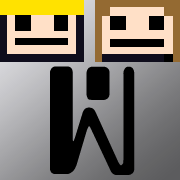
<style>
.page{position:relative;width:180px;height:180px;background:#000000}
.page>*{position:absolute;margin:0}
.t1{font:130px "Checkbook";color:#000000}
</style>
<div class="page">
<p class="t1" style="left:50px;top:66px;width:85px;height:109px">W</p>
</div>
